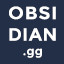
<style>
.page{position:relative;width:64px;height:64px;background:#232f47}
.page>*{position:absolute;margin:0}
.t1{font:18px "Montserrat-Bold";letter-spacing:0.025em;color:#ffffff;scale:1.07 1}
.t2{font:18px "Montserrat-Bold";letter-spacing:0.025em;color:#ffffff}
.t3{font:12px "Montserrat-Bold";letter-spacing:0.025em;color:#ffffff}
</style>
<div class="page">
<p class="t1" style="left:9px;top:6px;width:47px;height:52px;text-align:center">OBSI<br><span class="t2">DIAN<br></span><span class="t3">.gg</span></p>
</div>
